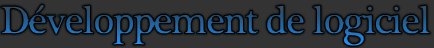
<style>
.page{position:relative;width:434px;height:48px;background:#333333}
.page>*{position:absolute;margin:0}
.t1{font:40px "PlantagenetCherokee";letter-spacing:-0.07em;font-weight:bold}
</style>
<div class="page">
<p class="t1" style="left:0px;top:3px;width:431px;height:44px">Développement de logiciel</p>
</div>
